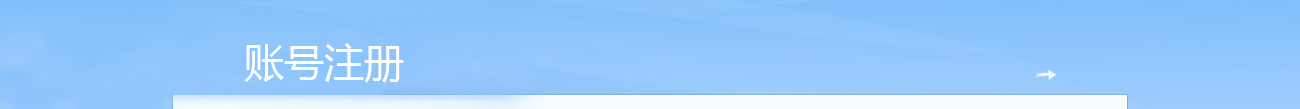
<style>
.page{position:relative;width:1300px;height:109px}
.page>*{position:absolute;margin:0}
.t1{font:40px "MicrosoftYaHei";color:#ffffff}
</style>
<div class="page">
<p class="t1" style="left:244px;top:43px;width:160px;height:40px">账号注册</p>
</div>
